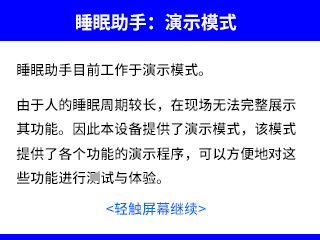
<style>
.page{position:relative;width:320px;height:240px;background:#ffffff}
.page>*{position:absolute;margin:0}
.t1{font:18px "SourceHanSansSC-Bold";color:#ffffff}
.t2{font:14px "SourceHanSansSC-Medium";color:#000000}
.t3{font:14px "SourceHanSansSC-Medium";color:#0069f6}
</style>
<div class="page">
<p class="t1" style="left:76px;top:13px;width:161px;height:18px">睡眠助手：演示模式</p>
<p class="t2" style="left:16px;top:63px;width:280px;height:122px">睡眠助手目前工作于演示模式。<br> <br>由于人的睡眠周期较长，在现场无法完整展示<br>其功能。因此本设备提供了演示模式，该模式<br>提供了各个功能的演示程序，可以方便地对这<br>些功能进行测试与体验。</p>
<p class="t3" style="left:106px;top:202px;width:100px;height:14px">&lt;轻触屏幕继续&gt;</p>
</div>
